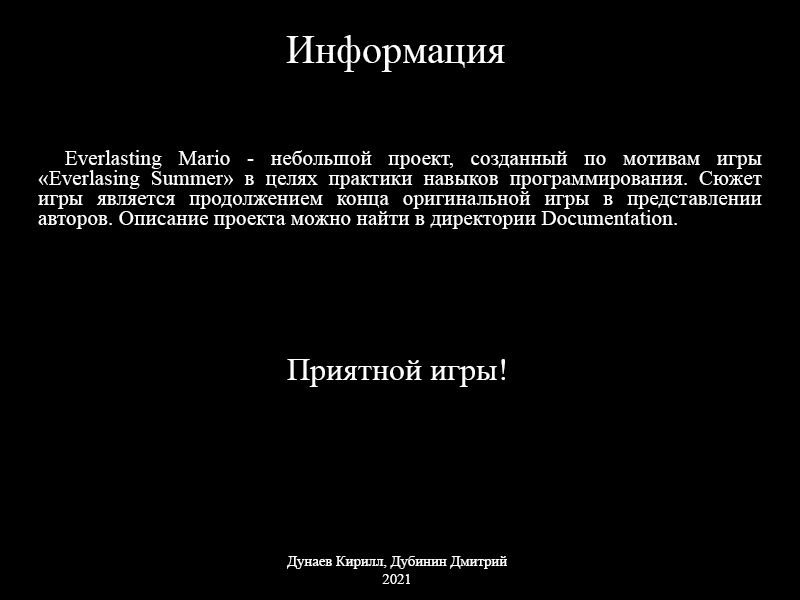
<style>
.page{position:relative;width:800px;height:600px;background:#000000}
.page>*{position:absolute;margin:0}
.t1{font:40px "TimesNewRomanPSMT";color:#ffffff}
.t2{font:21.3px/20px "TimesNewRomanPSMT";color:#ffffff}
.t3{font:32px "TimesNewRomanPSMT";color:#ffffff}
.t4{font:14.7px "TimesNewRomanPSMT";color:#ffffff}
</style>
<div class="page">
<p class="t1" style="left:286px;top:35px;width:219px;height:37px">Информация</p>
<p class="t2" style="left:38px;top:150px;width:724px;height:79px;text-align:justify">Everlasting Mario - небольшой проект, созданный по мотивам игры «Everlasing Summer» в целях практики навыков программирования. Сюжет игры является продолжением конца оригинальной игры в представлении авторов. Описание проекта можно найти в директории Documentation.</p>
<p class="t3" style="left:287px;top:359px;width:218px;height:28px">Приятной игры!</p>
<p class="t4" style="left:287px;top:556px;width:220px;height:28px;text-align:center">Дунаев Кирилл, Дубинин Дмитрий<br>2021</p>
</div>
